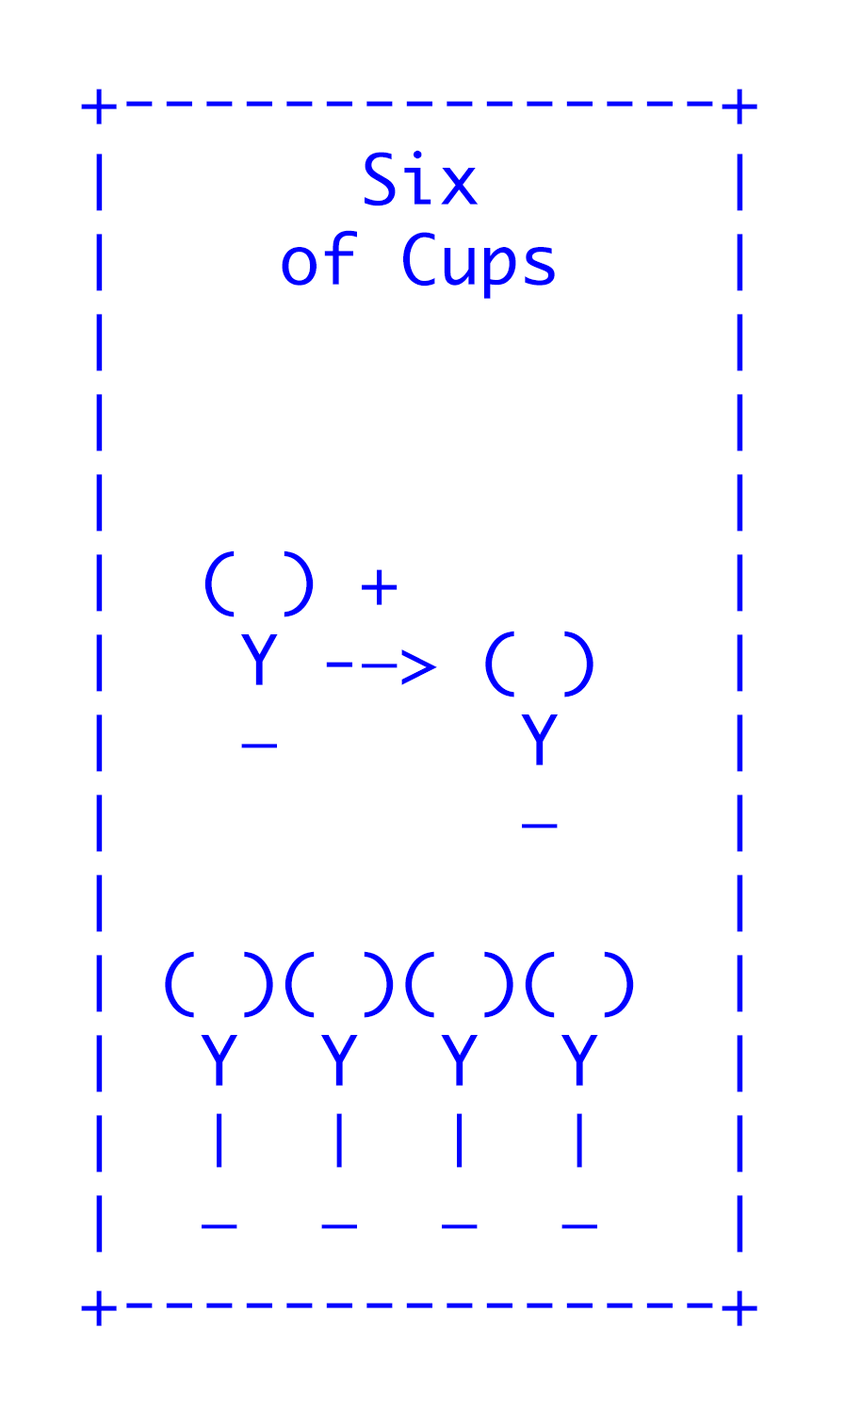
<style>
.page{position:relative;width:845px;height:1411px;background:#ffffff}
.page>*{position:absolute;margin:0}
.t1{font:66.7px "Monaco";color:#0000ff}
</style>
<div class="page">
<p class="t1" style="left:81px;top:89px;width:677px;height:1237px">+---------------+<br>│      Six      │<br>│    of Cups    │<br>│               │<br>│               │<br>│               │<br>│  ( ) +        │ <br>│   Y -—&gt; ( )   │ <br>│   —      Y    │ <br>│          —    │<br>│               │ <br>│ ( )( )( )( )  │ <br>│  Y  Y  Y  Y   │<br>│  |  |  |  |   │ <br>│  —  —  —  —   │<br>+---------------+</p>
</div>
